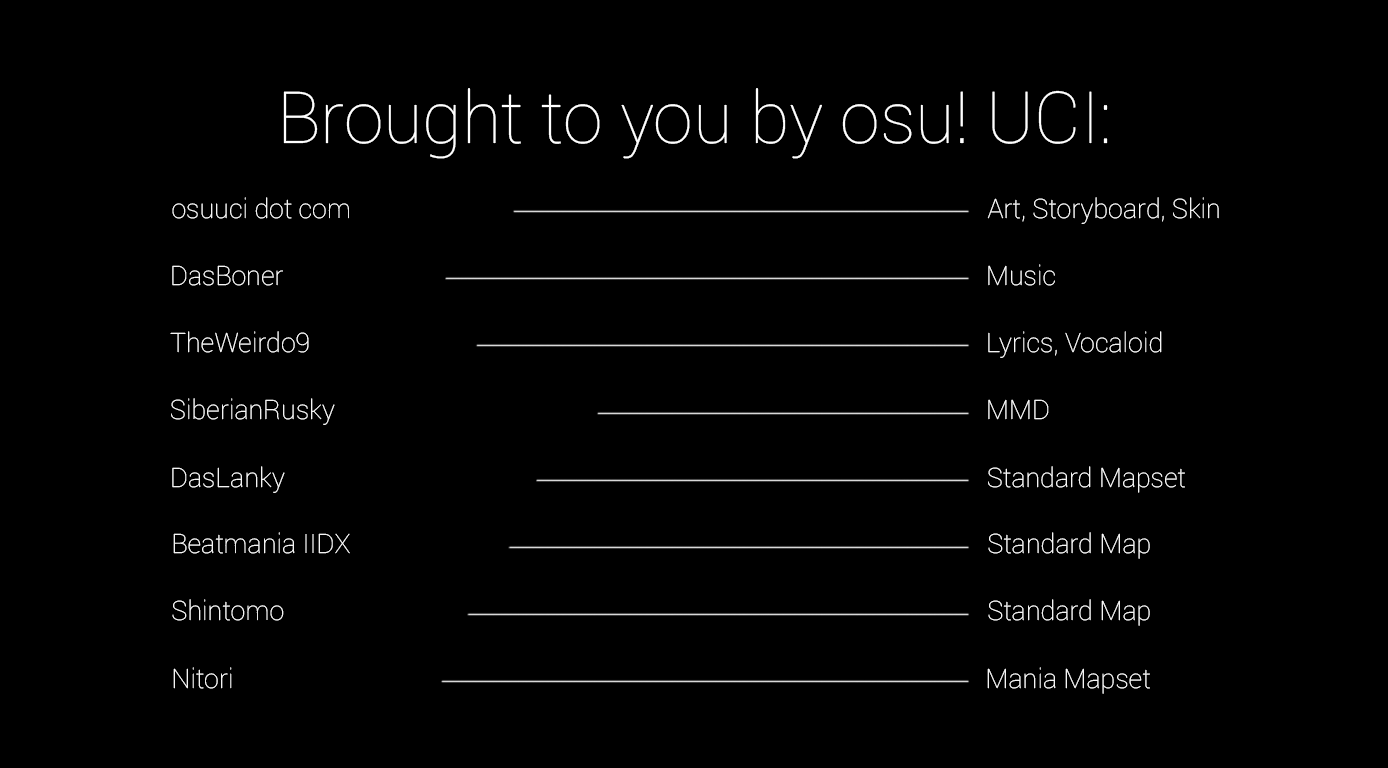
<style>
.page{position:relative;width:1388px;height:768px;background:#000000}
.page>*{position:absolute;margin:0}
.t1{font:72px "Roboto-Thin";color:#ffffff}
.t2{font:26.9px "Roboto-Thin";color:#ffffff}
</style>
<div class="page">
<p class="t1" style="left:283px;top:88px;width:825px;height:71px">Brought to you by osu! UCI:</p>
<p class="t2" style="left:172px;top:197px;width:177px;height:22px">osuuci dot com</p>
<p class="t2" style="left:987px;top:197px;width:232px;height:27px">Art, Storyboard, Skin</p>
<p class="t2" style="left:172px;top:265px;width:111px;height:21px">DasBoner</p>
<p class="t2" style="left:988px;top:264px;width:67px;height:22px">Music</p>
<p class="t2" style="left:170px;top:331px;width:139px;height:22px">TheWeirdo9</p>
<p class="t2" style="left:988px;top:331px;width:174px;height:27px">Lyrics, Vocaloid</p>
<p class="t2" style="left:171px;top:398px;width:164px;height:27px">SiberianRusky</p>
<p class="t2" style="left:988px;top:399px;width:61px;height:21px">MMD</p>
<p class="t2" style="left:172px;top:466px;width:113px;height:27px">DasLanky</p>
<p class="t2" style="left:988px;top:466px;width:197px;height:27px">Standard Mapset</p>
<p class="t2" style="left:173px;top:532px;width:177px;height:22px">Beatmania IIDX</p>
<p class="t2" style="left:988px;top:532px;width:162px;height:27px">Standard Map</p>
<p class="t2" style="left:172px;top:599px;width:112px;height:22px">Shintomo</p>
<p class="t2" style="left:988px;top:599px;width:162px;height:27px">Standard Map</p>
<p class="t2" style="left:173px;top:667px;width:59px;height:22px">Nitori</p>
<p class="t2" style="left:987px;top:667px;width:163px;height:27px">Mania Mapset</p>
</div>
